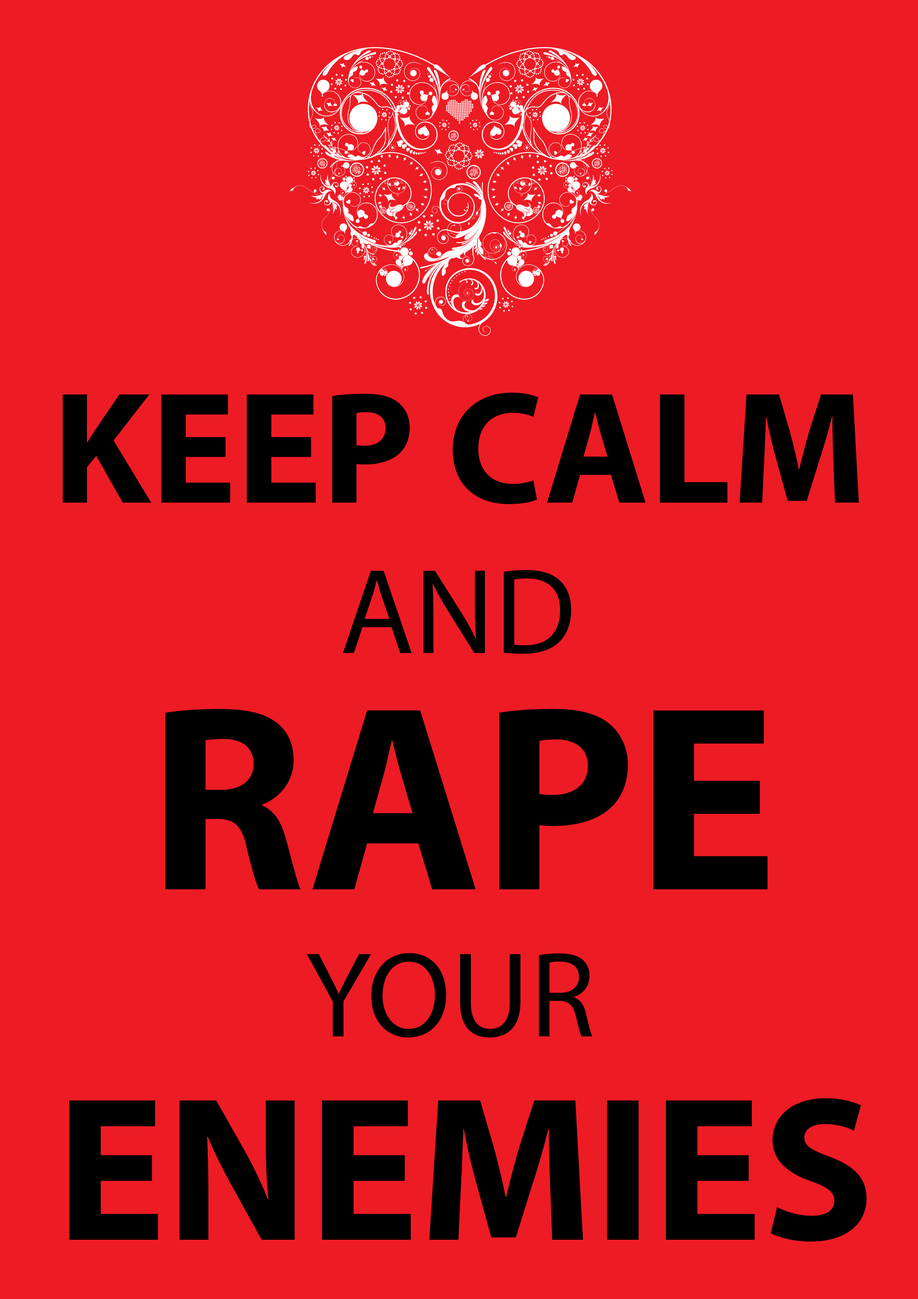
<style>
.page{position:relative;width:918px;height:1299px;background:#ed1b24}
.page>*{position:absolute;margin:0}
.t1{font:160.3px "MyriadPro-Bold";color:#000000}
.t2{font:121.8px "MyriadPro-Regular";color:#000000}
.t3{font:265.5px "MyriadPro-Bold";color:#000000}
.t4{font:165.9px "MyriadPro-Bold";color:#000000}
.t5{font:206.6px "MyriadPro-Bold";color:#000000}
</style>
<div class="page">
<p class="t1" style="left:63px;top:392px;width:796px;height:112px">KEEP CALM</p>
<p class="t2" style="left:343px;top:569px;width:228px;height:85px">AND</p>
<p class="t3" style="left:166px;top:708px;width:602px;height:181px"><span class="t4">  </span>RAPE<span class="t4"></span></p>
<p class="t2" style="left:307px;top:953px;width:286px;height:84px">YOUR</p>
<p class="t5" style="left:69px;top:1098px;width:798px;height:143px">ENEMIES<span class="t4"></span></p>
</div>
